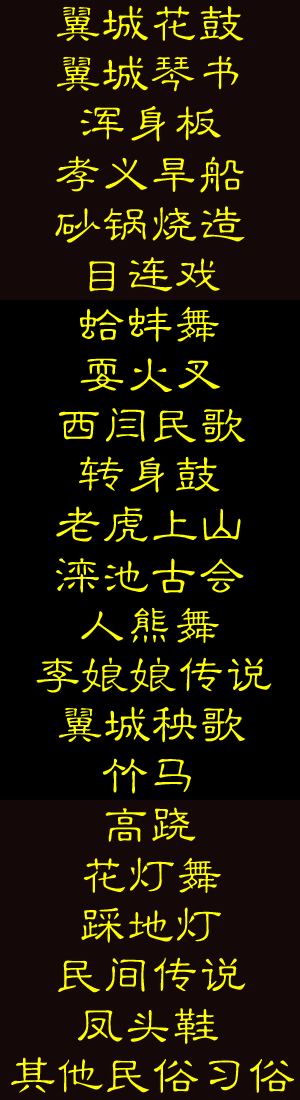
<style>
.page{position:relative;width:300px;height:1100px;background:#140808}
.page>*{position:absolute;margin:0}
.t1{font:48px "CXLiPRC-Medium";color:#ffff00}
</style>
<div class="page">
<p class="t1" style="left:57px;top:5px;width:187px;height:36px">翼城花鼓</p>
<p class="t1" style="left:57px;top:55px;width:182px;height:37px">翼城琴书</p>
<p class="t1" style="left:80px;top:106px;width:141px;height:36px">浑身板</p>
<p class="t1" style="left:56px;top:156px;width:188px;height:37px">孝义旱船</p>
<p class="t1" style="left:55px;top:206px;width:190px;height:37px">砂锅烧造</p>
<p class="t1" style="left:89px;top:257px;width:131px;height:35px">目连戏</p>
<p class="t1" style="left:80px;top:306px;width:139px;height:36px">蛤蚌舞</p>
<p class="t1" style="left:80px;top:358px;width:140px;height:34px">耍火叉</p>
<p class="t1" style="left:59px;top:408px;width:187px;height:35px">西闫民歌</p>
<p class="t1" style="left:79px;top:456px;width:141px;height:37px">转身鼓</p>
<p class="t1" style="left:56px;top:506px;width:185px;height:36px">老虎上山</p>
<p class="t1" style="left:56px;top:558px;width:188px;height:35px">滦池古会</p>
<p class="t1" style="left:81px;top:607px;width:138px;height:36px">人熊舞</p>
<p class="t1" style="left:36px;top:657px;width:236px;height:36px">李娘娘传说</p>
<p class="t1" style="left:59px;top:706px;width:187px;height:37px">翼城秧歌</p>
<p class="t1" style="left:102px;top:758px;width:89px;height:36px">竹马</p>
<p class="t1" style="left:105px;top:807px;width:91px;height:35px">高跷</p>
<p class="t1" style="left:83px;top:857px;width:138px;height:36px">花灯舞</p>
<p class="t1" style="left:81px;top:907px;width:140px;height:36px">踩地灯</p>
<p class="t1" style="left:58px;top:957px;width:188px;height:36px">民间传说</p>
<p class="t1" style="left:78px;top:1008px;width:140px;height:36px">凤头鞋</p>
<p class="t1" style="left:11px;top:1057px;width:283px;height:36px">其他民俗习俗</p>
</div>
